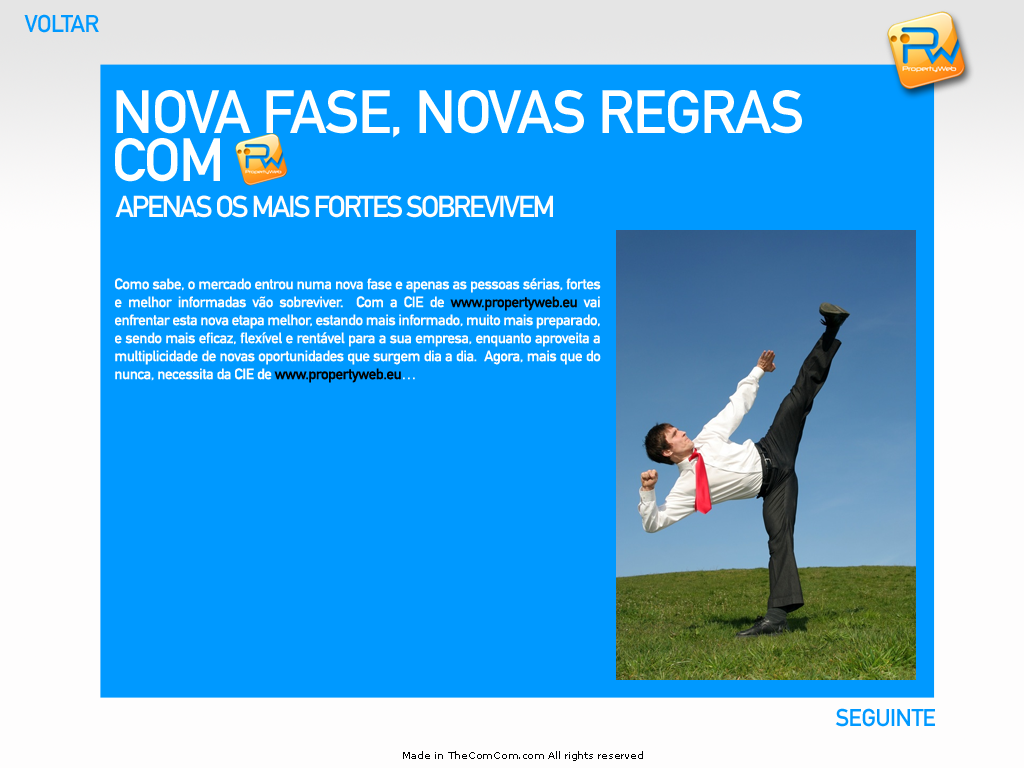
<style>
.page{position:relative;width:1024px;height:768px;background:#0099ff}
.page>*{position:absolute;margin:0}
.t1{font:24px "DINMittelschriftStd";letter-spacing:-0.025em;color:#0099ff}
.t2{font:60px "DINMittelschriftStd";letter-spacing:-0.025em;color:#ffffff;text-transform:uppercase}
.t3{font:30px "DINMittelschriftStd";letter-spacing:-0.075em;color:#fefdfd}
.t4{font:15px "DINMittelschriftStd";letter-spacing:-0.025em;color:#fefdfd}
.t5{font:15px "DINMittelschriftStd";letter-spacing:-0.025em;color:#040404}
.t6{font:15px "DINMittelschriftStd";letter-spacing:-0.025em;color:#010101}
.t7{font:10px "MSReferenceSansSerif";letter-spacing:-0.025em;color:#010101}
</style>
<div class="page">
<p class="t1" style="left:24px;top:14px;width:75px;height:19px">VOLTAR</p>
<p class="t2" style="left:115px;top:90px;width:687px;height:92px">NOVA FASE, NOVAS REGRAS COM</p>
<p class="t3" style="left:115px;top:195px;width:438px;height:23px">APENAS OS MAIS FORTES SOBREVIVEM</p>
<p class="t4" style="left:115px;top:278px;width:486px;height:105px;text-align:justify">Como sabe, o mercado entrou numa nova fase e apenas as pessoas sérias, fortes e melhor informadas vão sobreviver.  Com a CIE de <span class="t5">www.propertyweb.eu</span> vai enfrentar esta nova etapa melhor, estando mais informado, muito mais preparado, e sendo mais eficaz, flexível e rentável para a sua empresa, enquanto aproveita a multiplicidade de novas oportunidades que surgem dia a dia.  Agora, mais que do nunca, necessita da CIE de <span class="t6">www.propertyweb.eu</span>…</p>
<p class="t1" style="left:835px;top:708px;width:100px;height:19px">SEGUINTE</p>
<p class="t7" style="left:403px;top:751px;width:240px;height:10px">Made in TheComCom.com All rights reserved</p>
</div>
